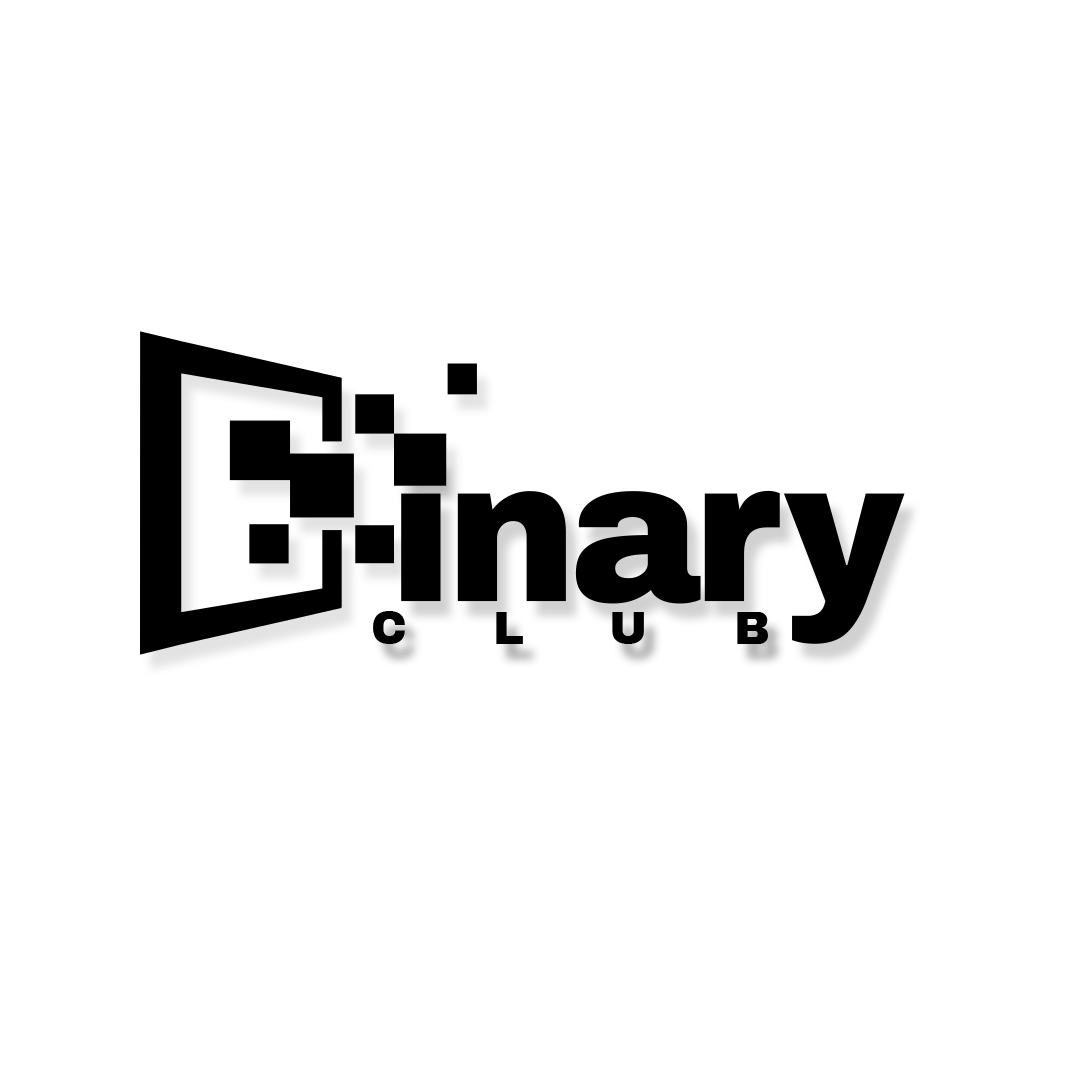
<style>
.page{position:relative;width:1080px;height:1080px;background:#ffffff}
.page>*{position:absolute;margin:0}
.t1{font:203.5px "ArchivoBlack-Regular";letter-spacing:-0.04em;color:#000000;scale:0.97 1}
.t2{font:46px "ArchivoBlack-Regular";letter-spacing:1.88em;color:#000000}
</style>
<div class="page">
<p class="t1" style="left:401px;top:453px;width:504px;height:191px">inary</p>
<p class="t2" style="left:373px;top:611px;width:395px;height:33px">CLUB</p>
</div>
